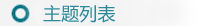
<style>
.page{position:relative;width:201px;height:26px;background:#f3f3f3}
.page>*{position:absolute;margin:0}
.t1{font:18px "MicrosoftYaHei";letter-spacing:0.01em;color:#2b8b9b}
</style>
<div class="page">
<p class="t1" style="left:43px;top:5px;width:73px;height:18px">主题列表</p>
</div>
